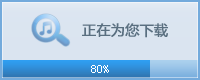
<style>
.page{position:relative;width:200px;height:80px;background:#dae4f0}
.page>*{position:absolute;margin:0}
.t1{font:14px "MicrosoftYaHei";color:#5a6f80;font-weight:bold}
.t2{font:12px "SimSun";color:#ffffff}
</style>
<div class="page">
<p class="t1" style="left:82px;top:23px;width:86px;height:15px">正在为您下载</p>
<p class="t2" style="left:91px;top:65px;width:18px;height:8px">80%</p>
</div>
